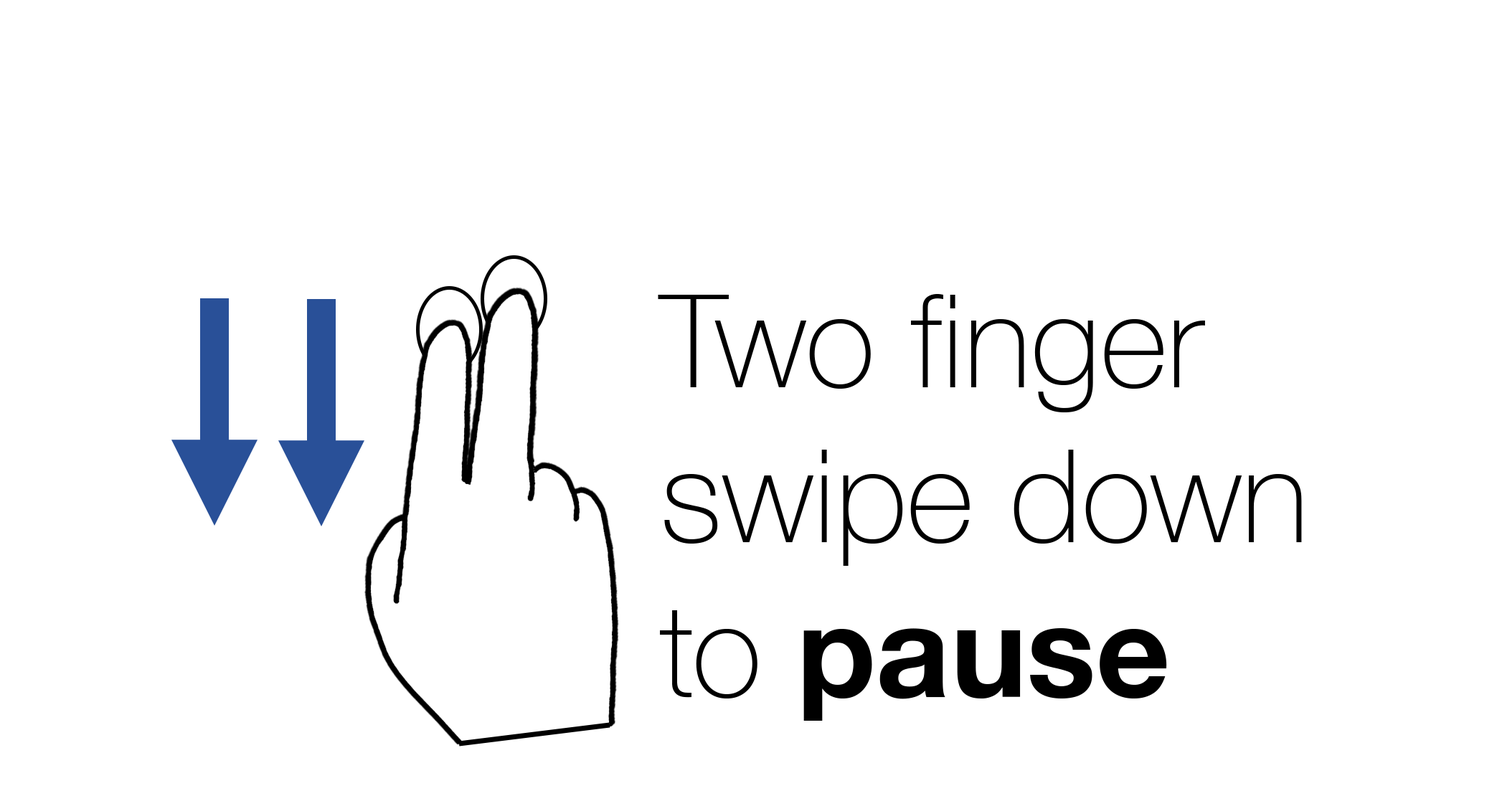
<style>
.page{position:relative;width:1497px;height:796px;background:#ffffff}
.page>*{position:absolute;margin:0}
.t1{font:129.1px "HelveticaNeue-Thin";color:#000000}
.t2{font:129.1px "HelveticaNeue-Bold";color:#000000}
</style>
<div class="page">
<p class="t1" style="left:658px;top:294px;width:644px;height:427px">Two finger<br>swipe down<br>to <span class="t2">pause</span></p>
</div>
